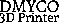
<style>
.page{position:relative;width:61px;height:28px;background:#ffffff}
.page>*{position:absolute;margin:0}
.t1{font:18px "Alegreya-Regular";color:#000000}
.t2{font:13px "Andada-Regular";color:#000000}
</style>
<div class="page">
<p class="t1" style="left:0px;top:0px;width:59px;height:13px">DMYCO</p>
<p class="t2" style="left:0px;top:12px;width:59px;height:12px">3D Printer</p>
</div>
